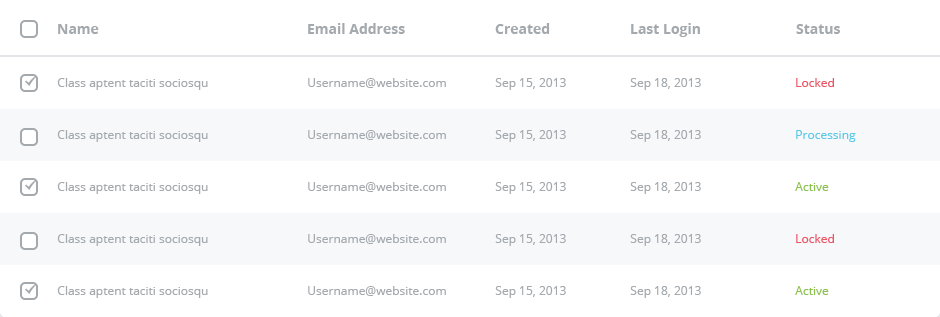
<style>
.page{position:relative;width:940px;height:317px;background:#ffffff}
.page>*{position:absolute;margin:0}
.t1{font:14px "OpenSans-Bold";color:#a4a9ae}
.t2{font:12px "OpenSans";color:#a4a9ae}
.t3{font:12px "OpenSans";color:#ed5565}
.t4{font:12px "OpenSans";color:#5dc9e6}
.t5{font:12px "OpenSans";color:#8cc152}
</style>
<div class="page">
<p class="t1" style="left:58px;top:24px;width:41px;height:10px">Name</p>
<p class="t1" style="left:308px;top:23px;width:97px;height:11px">Email Address</p>
<p class="t1" style="left:495px;top:23px;width:55px;height:11px">Created</p>
<p class="t1" style="left:631px;top:23px;width:69px;height:14px">Last Login</p>
<p class="t1" style="left:796px;top:24px;width:44px;height:10px">Status</p>
<p class="t2" style="left:57px;top:78px;width:151px;height:12px">Class aptent taciti sociosqu</p>
<p class="t2" style="left:308px;top:78px;width:138px;height:10px">Username@website.com</p>
<p class="t2" style="left:495px;top:78px;width:71px;height:12px">Sep 15, 2013</p>
<p class="t2" style="left:630px;top:78px;width:71px;height:12px">Sep 18, 2013</p>
<p class="t3" style="left:796px;top:78px;width:38px;height:9px">Locked</p>
<p class="t2" style="left:57px;top:130px;width:151px;height:12px">Class aptent taciti sociosqu</p>
<p class="t2" style="left:308px;top:130px;width:138px;height:10px">Username@website.com</p>
<p class="t2" style="left:495px;top:130px;width:71px;height:12px">Sep 15, 2013</p>
<p class="t2" style="left:630px;top:130px;width:71px;height:12px">Sep 18, 2013</p>
<p class="t4" style="left:796px;top:130px;width:60px;height:12px">Processing</p>
<p class="t2" style="left:57px;top:182px;width:151px;height:12px">Class aptent taciti sociosqu</p>
<p class="t2" style="left:308px;top:182px;width:138px;height:10px">Username@website.com</p>
<p class="t2" style="left:495px;top:182px;width:71px;height:12px">Sep 15, 2013</p>
<p class="t2" style="left:630px;top:182px;width:71px;height:12px">Sep 18, 2013</p>
<p class="t5" style="left:795px;top:182px;width:34px;height:9px">Active</p>
<p class="t2" style="left:57px;top:234px;width:151px;height:12px">Class aptent taciti sociosqu</p>
<p class="t2" style="left:308px;top:234px;width:138px;height:10px">Username@website.com</p>
<p class="t2" style="left:495px;top:234px;width:71px;height:12px">Sep 15, 2013</p>
<p class="t2" style="left:630px;top:234px;width:71px;height:12px">Sep 18, 2013</p>
<p class="t3" style="left:796px;top:234px;width:38px;height:9px">Locked</p>
<p class="t2" style="left:57px;top:286px;width:151px;height:12px">Class aptent taciti sociosqu</p>
<p class="t2" style="left:308px;top:286px;width:138px;height:10px">Username@website.com</p>
<p class="t2" style="left:495px;top:286px;width:71px;height:12px">Sep 15, 2013</p>
<p class="t2" style="left:630px;top:286px;width:71px;height:12px">Sep 18, 2013</p>
<p class="t5" style="left:795px;top:286px;width:34px;height:9px">Active</p>
</div>
